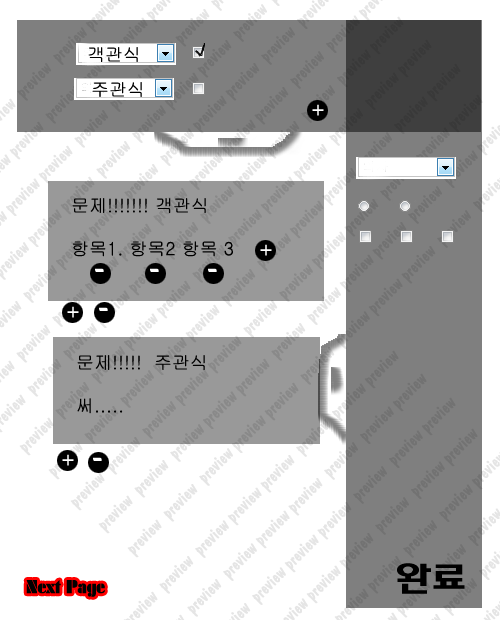
<style>
.page{position:relative;width:500px;height:620px;background:#ffffff}
.page>*{position:absolute;margin:0}
.t1{font:18px "Gulim";color:#000000}
.t2{font:18px "DomCasual-BT";color:#ffffff}
.t3{font:36px "DomCasual-BT";color:#ffffff}
.t4{font:36px "HYsupB";color:#000000}
.t5{font:18px "FuturaBlack-BT";color:#000000}
.t6{font:18px "DomCasual-BT";color:#e5e5e5}
</style>
<div class="page">
<p class="t1" style="left:88px;top:47px;width:50px;height:15px">객관식</p>
<p class="t1" style="left:92px;top:82px;width:50px;height:15px">주관식</p>
<p class="t2" style="left:312px;top:104px;width:12px;height:12px">+</p>
<p class="t1" style="left:72px;top:198px;width:161px;height:59px">문제!!!!!!! 객관식<br><br>항목1. 항목2 항목 3</p>
<p class="t2" style="left:260px;top:244px;width:12px;height:12px">+</p>
<p class="t3" style="left:95px;top:268px;width:9px;height:4px">-</p>
<p class="t3" style="left:150px;top:268px;width:9px;height:4px">-</p>
<p class="t3" style="left:208px;top:268px;width:9px;height:4px">-</p>
<p class="t2" style="left:67px;top:306px;width:12px;height:12px">+</p>
<p class="t3" style="left:99px;top:307px;width:9px;height:4px">-</p>
<p class="t1" style="left:77px;top:355px;width:128px;height:59px">문제!!!!!  주관식<br><br>써.....</p>
<p class="t2" style="left:62px;top:454px;width:12px;height:12px">+</p>
<p class="t3" style="left:93px;top:457px;width:9px;height:4px">-</p>
<p class="t4" style="left:397px;top:563px;width:68px;height:31px">완료</p>
<p class="t5" style="left:26px;top:580px;width:79px;height:17px">Next Page</p>
<p class="t6" style="left:483px;top:601px;width:17px;height:19px;rotate:-45deg">preview  preview  preview preview preview  preview  preview preview preview  preview  preview preview</p>
</div>
